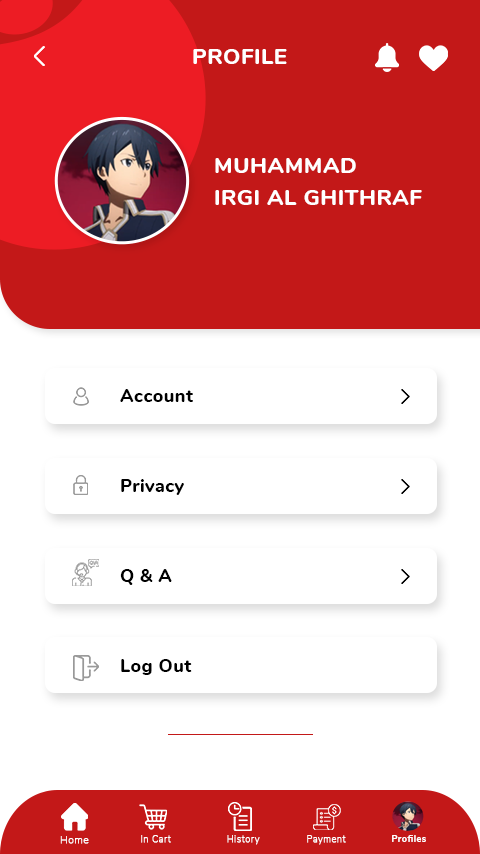
<style>
.page{position:relative;width:480px;height:854px;background:#ffffff}
.page>*{position:absolute;margin:0}
.t1{font:22.5px "Nunito-ExtraBold";letter-spacing:0.01em;color:#ffffff}
.t2{font:18.5px "Nunito-ExtraBold";letter-spacing:0.01em;color:#000000}
.t3{font:9.9px "Nunito-ExtraLight";letter-spacing:0.05em;color:#ffffff;font-weight:bold}
.t4{font:8.7px "Nunito-ExtraLight";letter-spacing:0.07em;color:#ffffff;font-weight:bold}
.t5{font:8.7px "Nunito-ExtraBold";letter-spacing:0.07em;color:#ffffff}
</style>
<div class="page">
<p class="t1" style="left:193px;top:49px;width:94px;height:15px">PROFILE</p>
<p class="t1" style="left:215px;top:158px;width:141px;height:15px">MUHAMMAD</p>
<p class="t1" style="left:215px;top:190px;width:207px;height:15px">IRGI AL GHITHRAF</p>
<p class="t2" style="left:120px;top:389px;width:73px;height:13px">Account</p>
<p class="t2" style="left:121px;top:479px;width:63px;height:16px">Privacy</p>
<p class="t2" style="left:120px;top:569px;width:52px;height:16px">Q &amp; A</p>
<p class="t2" style="left:121px;top:659px;width:71px;height:16px">Log Out</p>
<p class="t3" style="left:60px;top:836px;width:29px;height:8px">Home</p>
<p class="t4" style="left:141px;top:835px;width:30px;height:8px">In Cart</p>
<p class="t4" style="left:227px;top:835px;width:33px;height:10px">History</p>
<p class="t4" style="left:307px;top:835px;width:39px;height:10px">Payment</p>
<p class="t5" style="left:392px;top:835px;width:34px;height:7px">Profiles</p>
</div>
